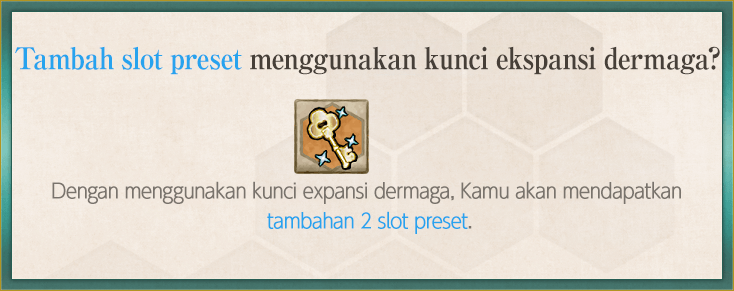
<style>
.page{position:relative;width:734px;height:291px}
.page>*{position:absolute;margin:0}
.t1{font:30px "RyuminPro-ExBold";letter-spacing:-0.04em;color:#463f38;scale:0.9 1}
.t2{font:30px "RyuminPro-ExBold";letter-spacing:-0.04em;color:#27a3ee;scale:0.9 1}
.t3{font:20px/30px "UDShinGoPro-Light";letter-spacing:-0.04em;color:#79736c;font-weight:bold;scale:0.9 1}
.t4{font:20px/30px "UDShinGoPro-Light";letter-spacing:-0.04em;color:#27a3ee;font-weight:bold;scale:0.9 1}
</style>
<div class="page">
<p class="t1" style="left:15px;top:46px;width:705px;height:29px"><span class="t2">Tambah slot preset </span>menggunakan kunci ekspansi dermaga?</p>
<p class="t3" style="left:52px;top:181px;width:629px;height:53px;text-align:center">Dengan menggunakan kunci expansi dermaga, Kamu akan mendapatkan<br> <span class="t4">tambahan 2 slot preset</span>.</p>
</div>
